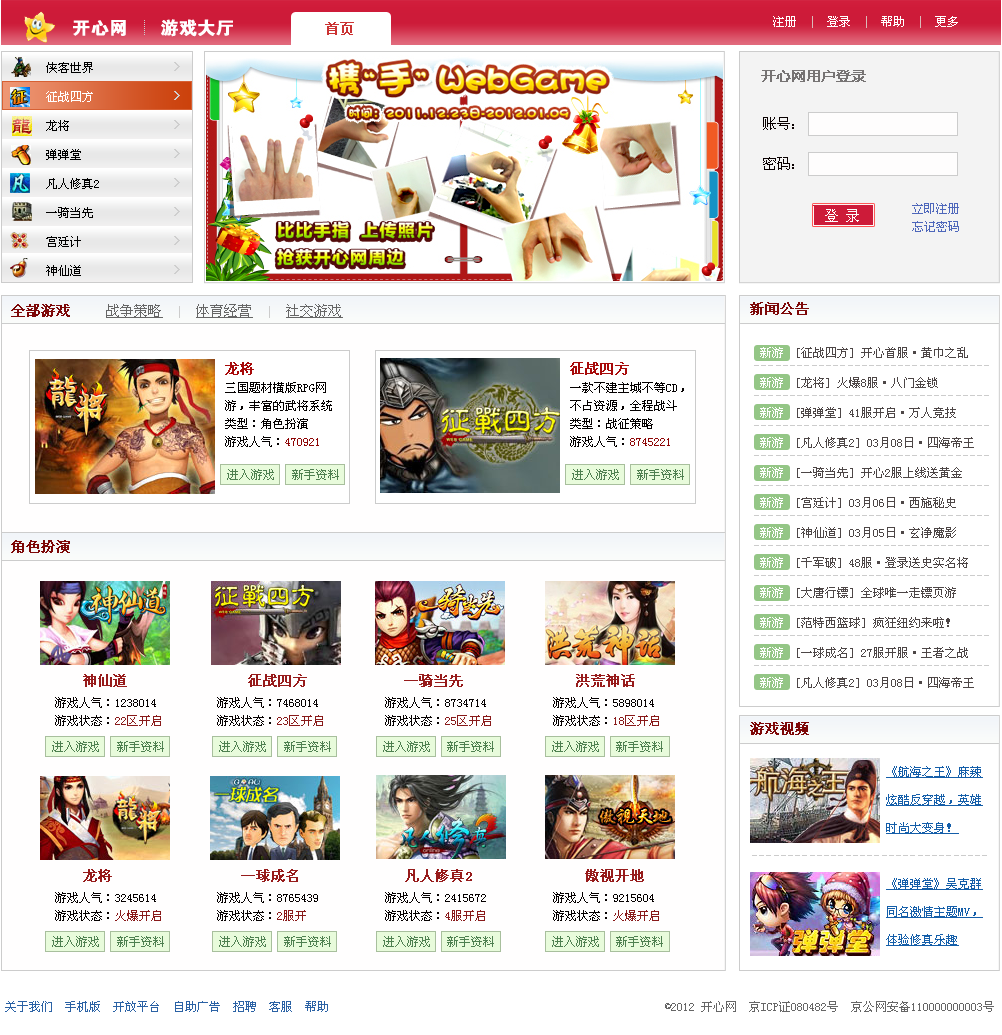
<style>
.page{position:relative;width:1002px;height:1035px;background:#ffffff}
.page>*{position:absolute;margin:0}
.t1{font:12px "SimSun";color:#ffffff}
.t2{font:12px "SimSun";color:#dbb9b9}
.t3{font:18px "FZDHTJW--GB1-0";color:#ffffff;font-weight:bold}
.t4{font:14px "SimSun";color:#cb3333;font-weight:bold}
.t5{font:12px/29px "SimSun";color:#000000}
.t6{font:12px/29px "SimSun";color:#ffffff}
.t7{font:14px/29px "SimSun";color:#cecece;font-weight:bold}
.t8{font:14px "MicrosoftYaHei";color:#767373;font-weight:bold}
.t9{font:14px/40px "SimSun";color:#090000}
.t10{font:14px "SimSun";color:#fefdfd}
.t11{font:12px/18px "SimSun";color:#4e67bb}
.t12{font:14px "SimSun";color:#7d0808;font-weight:bold}
.t13{font:14px "SimSun";color:#666666;text-decoration:underline}
.t14{font:12px "SimSun";color:#cccccc}
.t15{font:12px/30px "SimSun";color:#ffffff}
.t16{font:12px/30px "SimSun";color:#4d4646}
.t17{font:12px/18px "SimSun";color:#030000}
.t18{font:14px/18px "SimSun";color:#a70a0a;font-weight:bold}
.t19{font:12px/18px "SimSun";color:#8e0606}
.t20{font:12px "SimSun";color:#4e8050}
.t21{font:14px "SimSun";color:#971b1b;font-weight:bold}
.t22{font:12px/18px "SimSun";color:#050000}
.t23{font:12px/18px "SimSun";color:#891a1a}
.t24{font:12px/28px "SimSun";color:#145ea9;text-decoration:underline}
.t25{font:12px "SimSun";letter-spacing:0.1em;color:#cccccc}
.t26{font:12px "SimSun";color:#666666}
.t27{font:12px "SimSun";color:#2b62a5}
</style>
<div class="page">
<p class="t1" style="left:773px;top:16px;width:185px;height:12px">注册  <span class="t2">|</span>  登录  <span class="t2">|</span>  帮助  <span class="t2">|</span>  更多</p>
<p class="t3" style="left:73px;top:19px;width:160px;height:18px">开心网      游戏大厅</p>
<p class="t4" style="left:325px;top:22px;width:29px;height:13px">首页</p>
<p class="t5" style="left:46px;top:62px;width:53px;height:214px;text-align:justify">侠客世界<br><span class="t6">征战四方<br></span>龙将<br>弹弹堂<br>凡人修真2<br>一骑当先<br>宫廷计<br>神仙道</p>
<p class="t7" style="left:174px;top:62px;width:6px;height:212px;text-align:justify">&gt;<br>&gt;<br>&gt;<br>&gt;<br>&gt;<br>&gt;<br>&gt;<br>&gt;</p>
<p class="t8" style="left:761px;top:70px;width:105px;height:12px">开心网用户登录</p>
<p class="t9" style="left:763px;top:117px;width:31px;height:53px;text-align:justify">账号：<br>密码：</p>
<p class="t10" style="left:825px;top:209px;width:34px;height:13px">登 录</p>
<p class="t11" style="left:912px;top:203px;width:47px;height:29px">立即注册<br>忘记密码</p>
<p class="t12" style="left:11px;top:304px;width:332px;height:14px">全部游戏     <span class="t13">战争策略  </span><span class="t14">|  </span><span class="t13">体育经营  </span><span class="t14">|  </span><span class="t13">社交游戏</span></p>
<p class="t12" style="left:750px;top:302px;width:59px;height:13px">新闻公告</p>
<p class="t15" style="left:760px;top:347px;width:23px;height:341px">新游<br>新游<br>新游<br>新游<br>新游<br>新游<br>新游<br>新游<br>新游<br>新游<br>新游<br>新游</p>
<p class="t16" style="left:797px;top:347px;width:177px;height:341px">[征战四方] 开心首服·黄巾之乱<br>[龙将] 火爆8服·八门金锁<br>[弹弹堂] 41服开启·万人竞技<br>[凡人修真2] 03月08日·四海帝王<br>[一骑当先] 开心2服上线送黄金<br>[宫廷计] 03月06日·西施秘史<br>[神仙道] 03月05日·玄净魔影<br>[千军破] 48服·登录送史实名将<br>[大唐行镖] 全球唯一走镖页游<br>[范特西篮球] 疯狂纽约来啦！<br>[一球成名] 27服开服·王者之战<br>[凡人修真2] 03月08日·四海帝王</p>
<p class="t17" style="left:225px;top:362px;width:107px;height:85px"><span class="t18">龙将<br></span>三国题材横版RPG网<br>游，丰富的武将系统<br>类型：角色扮演<br>游戏人气：<span class="t19">470921</span></p>
<p class="t17" style="left:570px;top:362px;width:114px;height:85px"><span class="t18">征战四方<br></span>一款不建主城不等CD，<br>不占资源，全程战斗<br>类型：战征策略<br>游戏人气：<span class="t19">8745221</span></p>
<p class="t20" style="left:227px;top:469px;width:47px;height:11px">进入游戏</p>
<p class="t20" style="left:292px;top:469px;width:47px;height:11px">新手资料</p>
<p class="t20" style="left:572px;top:469px;width:47px;height:11px">进入游戏</p>
<p class="t20" style="left:637px;top:469px;width:47px;height:11px">新手资料</p>
<p class="t12" style="left:11px;top:540px;width:59px;height:13px">角色扮演</p>
<p class="t21" style="left:83px;top:674px;width:552px;height:13px">神仙道               征战四方            一骑当先              洪荒神话</p>
<p class="t22" style="left:55px;top:697px;width:604px;height:29px">游戏人气：1238014          游戏人气：7468014           游戏人气：8734714           游戏人气：5898014<br>游戏状态：<span class="t23">22区开启         </span>游戏状态：<span class="t23">23区开启          </span>游戏状态：<span class="t23">25区开启          </span>游戏状态：<span class="t23">18区开启</span></p>
<p class="t12" style="left:750px;top:722px;width:59px;height:13px">游戏视频</p>
<p class="t20" style="left:52px;top:741px;width:47px;height:11px">进入游戏</p>
<p class="t20" style="left:117px;top:741px;width:47px;height:11px">新手资料</p>
<p class="t20" style="left:219px;top:741px;width:47px;height:11px">进入游戏</p>
<p class="t20" style="left:284px;top:741px;width:47px;height:11px">新手资料</p>
<p class="t20" style="left:383px;top:741px;width:47px;height:11px">进入游戏</p>
<p class="t20" style="left:447px;top:741px;width:47px;height:11px">新手资料</p>
<p class="t20" style="left:552px;top:741px;width:47px;height:11px">进入游戏</p>
<p class="t20" style="left:616px;top:741px;width:47px;height:11px">新手资料</p>
<p class="t24" style="left:886px;top:766px;width:97px;height:180px">《航海之王》麻辣<br>炫酷反穿越，英雄<br>时尚大变身！<br><br>《弹弹堂》吴克群<br>同名激情主题MV，<br>体验修真乐趣</p>
<p class="t25" style="left:752px;top:855px;width:235px;height:1px">---------------------------------</p>
<p class="t25" style="left:752px;top:855px;width:235px;height:1px">---------------------------------</p>
<p class="t21" style="left:83px;top:869px;width:561px;height:13px">龙将                一球成名             凡人修真2              傲视开地</p>
<p class="t22" style="left:55px;top:892px;width:604px;height:29px">游戏人气：3245614          游戏人气：8765439           游戏人气：2415672           游戏人气：9215604<br>游戏状态：<span class="t23">火爆开启         </span>游戏状态：<span class="t23">2服开             </span>游戏状态：<span class="t23">4服开启           </span>游戏状态：<span class="t23">火爆开启</span></p>
<p class="t20" style="left:52px;top:936px;width:47px;height:11px">进入游戏</p>
<p class="t20" style="left:117px;top:936px;width:47px;height:11px">新手资料</p>
<p class="t20" style="left:219px;top:936px;width:47px;height:11px">进入游戏</p>
<p class="t20" style="left:284px;top:936px;width:47px;height:11px">新手资料</p>
<p class="t20" style="left:383px;top:936px;width:47px;height:11px">进入游戏</p>
<p class="t20" style="left:447px;top:936px;width:47px;height:11px">新手资料</p>
<p class="t20" style="left:552px;top:936px;width:47px;height:11px">进入游戏</p>
<p class="t20" style="left:616px;top:936px;width:47px;height:11px">新手资料</p>
<p class="t26" style="left:5px;top:1001px;width:989px;height:11px"><span class="t27">关于我们  手机版  开放平台  自助广告  招聘  客服  帮助                                                       </span> ©2012 开心网  京ICP证080482号  京公网安备110000000003号</p>
</div>
